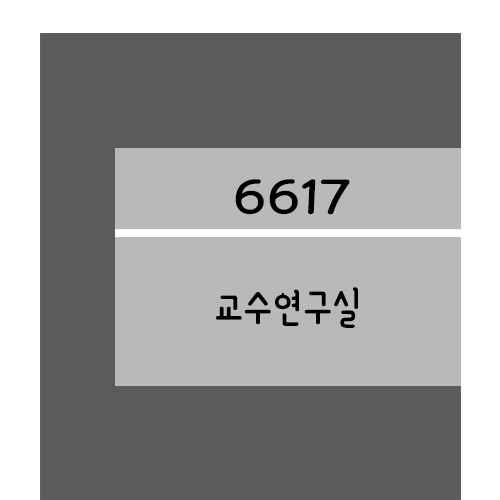
<style>
.page{position:relative;width:500px;height:500px;background:#5d5a5a}
.page>*{position:absolute;margin:0}
.t1{font:61.2px "YanoljaYacheR";color:#000000;scale:1.18 1}
.t2{font:48px "YanoljaYacheR";color:#000000}
</style>
<div class="page">
<p class="t1" style="left:235px;top:179px;width:115px;height:36px">6617</p>
<p class="t2" style="left:215px;top:287px;width:143px;height:41px">교수연구실</p>
</div>
